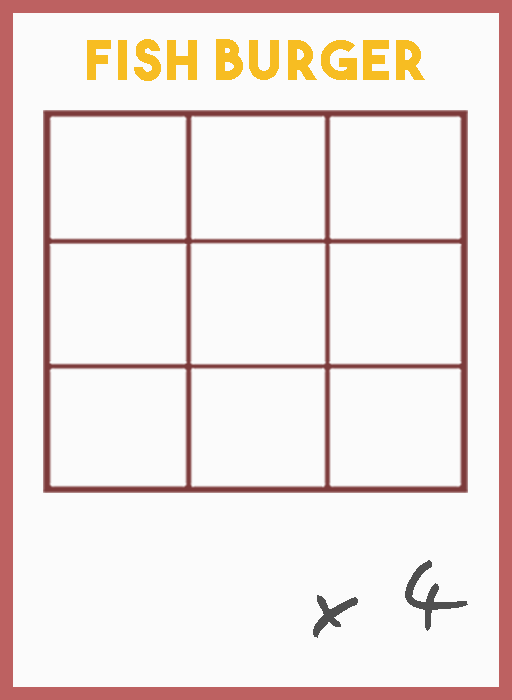
<style>
.page{position:relative;width:512px;height:700px;background:#fbfbfb}
.page>*{position:absolute;margin:0}
.t1{font:54.5px "TheBoldFont";letter-spacing:0.05em;color:#f7bd22}
.t2{font:106.1px "EasySpeech";letter-spacing:0.05em;color:#4f4f4f}
</style>
<div class="page">
<p class="t1" style="left:87px;top:39px;width:338px;height:42px">Fish burger</p>
<p class="t2" style="left:313px;top:560px;width:155px;height:78px">x 4</p>
</div>
